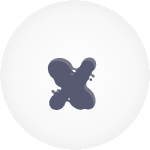
<style>
.page{position:relative;width:150px;height:150px;background:#ffffff}
.page>*{position:absolute;margin:0}
.t1{font:100px "SpiltInk";letter-spacing:-0.005em;color:#575a70}
</style>
<div class="page">
<p class="t1" style="left:47px;top:57px;width:50px;height:53px">x</p>
</div>
